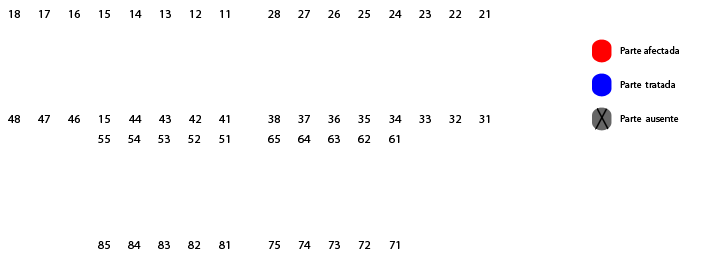
<style>
.page{position:relative;width:721px;height:260px;background:#ffffff}
.page>*{position:absolute;margin:0}
.t1{font:12px "MyriadPro-Regular";color:#000000}
.t2{font:10px "MyriadPro-Regular";color:#000000}
</style>
<div class="page">
<p class="t1" style="left:9px;top:10px;width:11px;height:8px">18</p>
<p class="t1" style="left:39px;top:10px;width:11px;height:8px">17</p>
<p class="t1" style="left:69px;top:10px;width:11px;height:8px">16</p>
<p class="t1" style="left:99px;top:10px;width:11px;height:8px">15</p>
<p class="t1" style="left:130px;top:10px;width:12px;height:8px">14</p>
<p class="t1" style="left:160px;top:10px;width:11px;height:8px">13</p>
<p class="t1" style="left:190px;top:10px;width:12px;height:8px">12</p>
<p class="t1" style="left:220px;top:10px;width:10px;height:8px">11</p>
<p class="t1" style="left:268px;top:10px;width:12px;height:8px">28</p>
<p class="t1" style="left:298px;top:10px;width:12px;height:8px">27</p>
<p class="t1" style="left:328px;top:10px;width:12px;height:8px">26</p>
<p class="t1" style="left:358px;top:10px;width:12px;height:8px">25</p>
<p class="t1" style="left:389px;top:10px;width:13px;height:8px">24</p>
<p class="t1" style="left:419px;top:10px;width:12px;height:8px">23</p>
<p class="t1" style="left:449px;top:10px;width:13px;height:8px">22</p>
<p class="t1" style="left:479px;top:10px;width:11px;height:8px">21</p>
<p class="t2" style="left:620px;top:46px;width:59px;height:8px">Parte afectada</p>
<p class="t2" style="left:620px;top:80px;width:55px;height:8px">Parte tratada</p>
<p class="t1" style="left:8px;top:115px;width:12px;height:8px">48</p>
<p class="t1" style="left:38px;top:115px;width:12px;height:8px">47</p>
<p class="t1" style="left:68px;top:115px;width:12px;height:8px">46</p>
<p class="t1" style="left:99px;top:115px;width:11px;height:8px">15</p>
<p class="t1" style="left:129px;top:115px;width:13px;height:8px">44</p>
<p class="t1" style="left:159px;top:115px;width:12px;height:8px">43</p>
<p class="t1" style="left:189px;top:115px;width:13px;height:8px">42</p>
<p class="t1" style="left:219px;top:115px;width:11px;height:8px">41</p>
<p class="t1" style="left:268px;top:115px;width:12px;height:8px">38</p>
<p class="t1" style="left:298px;top:115px;width:12px;height:8px">37</p>
<p class="t1" style="left:328px;top:115px;width:12px;height:8px">36</p>
<p class="t1" style="left:358px;top:115px;width:12px;height:8px">35</p>
<p class="t1" style="left:389px;top:115px;width:13px;height:8px">34</p>
<p class="t1" style="left:419px;top:115px;width:12px;height:8px">33</p>
<p class="t1" style="left:449px;top:115px;width:13px;height:8px">32</p>
<p class="t1" style="left:479px;top:115px;width:11px;height:8px">31</p>
<p class="t2" style="left:620px;top:115px;width:59px;height:7px">Parte ausente</p>
<p class="t1" style="left:98px;top:135px;width:12px;height:8px">55</p>
<p class="t1" style="left:128px;top:135px;width:13px;height:8px">54</p>
<p class="t1" style="left:158px;top:135px;width:12px;height:8px">53</p>
<p class="t1" style="left:188px;top:135px;width:13px;height:8px">52</p>
<p class="t1" style="left:219px;top:135px;width:11px;height:8px">51</p>
<p class="t1" style="left:268px;top:135px;width:12px;height:8px">65</p>
<p class="t1" style="left:298px;top:135px;width:13px;height:8px">64</p>
<p class="t1" style="left:328px;top:135px;width:12px;height:8px">63</p>
<p class="t1" style="left:358px;top:135px;width:13px;height:8px">62</p>
<p class="t1" style="left:389px;top:135px;width:11px;height:8px">61</p>
<p class="t1" style="left:98px;top:241px;width:12px;height:8px">85</p>
<p class="t1" style="left:128px;top:241px;width:13px;height:8px">84</p>
<p class="t1" style="left:158px;top:241px;width:12px;height:8px">83</p>
<p class="t1" style="left:188px;top:241px;width:13px;height:8px">82</p>
<p class="t1" style="left:219px;top:241px;width:11px;height:8px">81</p>
<p class="t1" style="left:268px;top:241px;width:12px;height:8px">75</p>
<p class="t1" style="left:298px;top:241px;width:13px;height:8px">74</p>
<p class="t1" style="left:328px;top:241px;width:12px;height:8px">73</p>
<p class="t1" style="left:358px;top:241px;width:13px;height:8px">72</p>
<p class="t1" style="left:389px;top:241px;width:11px;height:8px">71</p>
</div>
